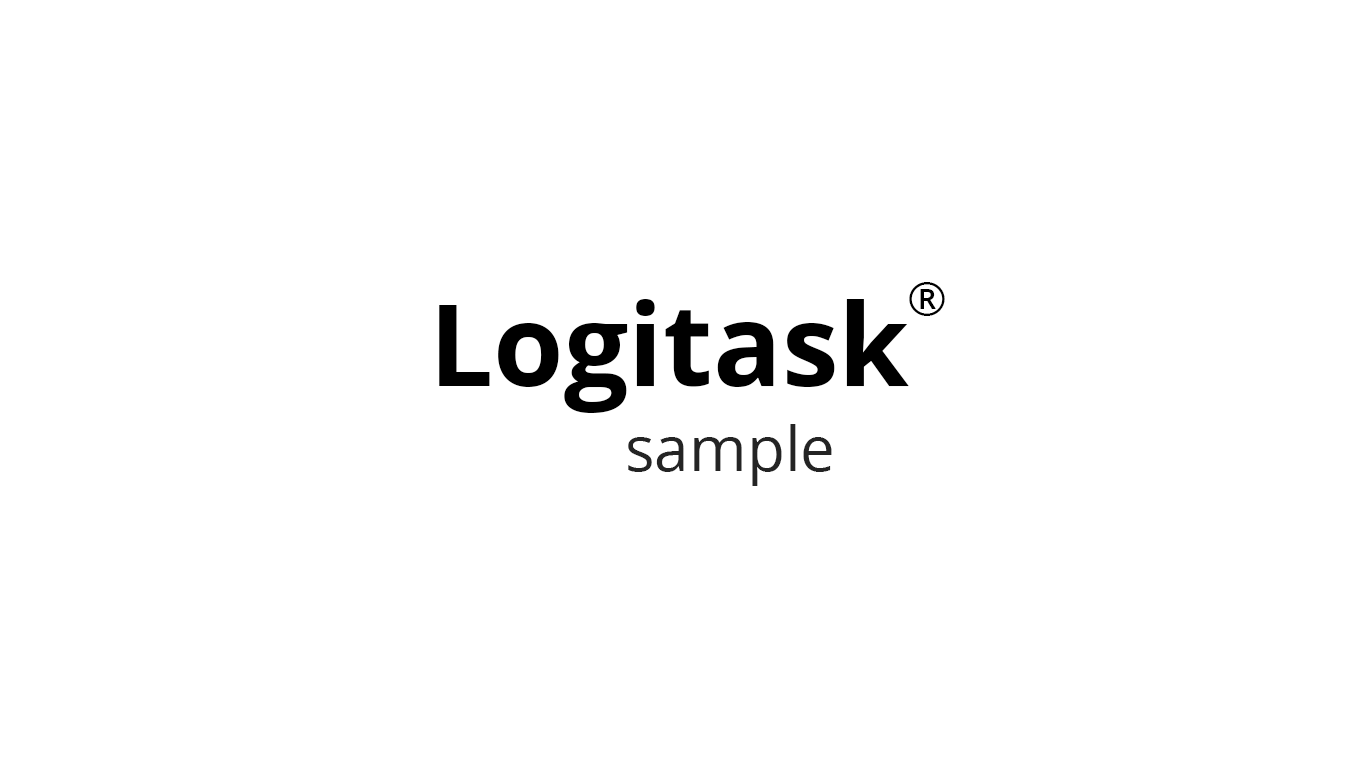
<style>
.page{position:relative;width:1366px;height:768px;background:#ffffff}
.page>*{position:absolute;margin:0}
.t1{font:48px "OpenSans";color:#000000}
.t2{font:114px "OpenSans-Bold";color:#000000}
.t3{font:62px "OpenSans";color:#242424}
</style>
<div class="page">
<p class="t1" style="left:909px;top:282px;width:36px;height:34px">®</p>
<p class="t2" style="left:439px;top:299px;width:470px;height:114px">Logitask</p>
<p class="t3" style="left:628px;top:424px;width:204px;height:62px">sample</p>
</div>
